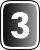
<style>
.page{position:relative;width:40px;height:50px}
.page>*{position:absolute;margin:0}
.t1{font:30px "HeadlineR-HM";color:#ffffff}
</style>
<div class="page">
<p class="t1" style="left:11px;top:12px;width:19px;height:27px">3</p>
</div>
